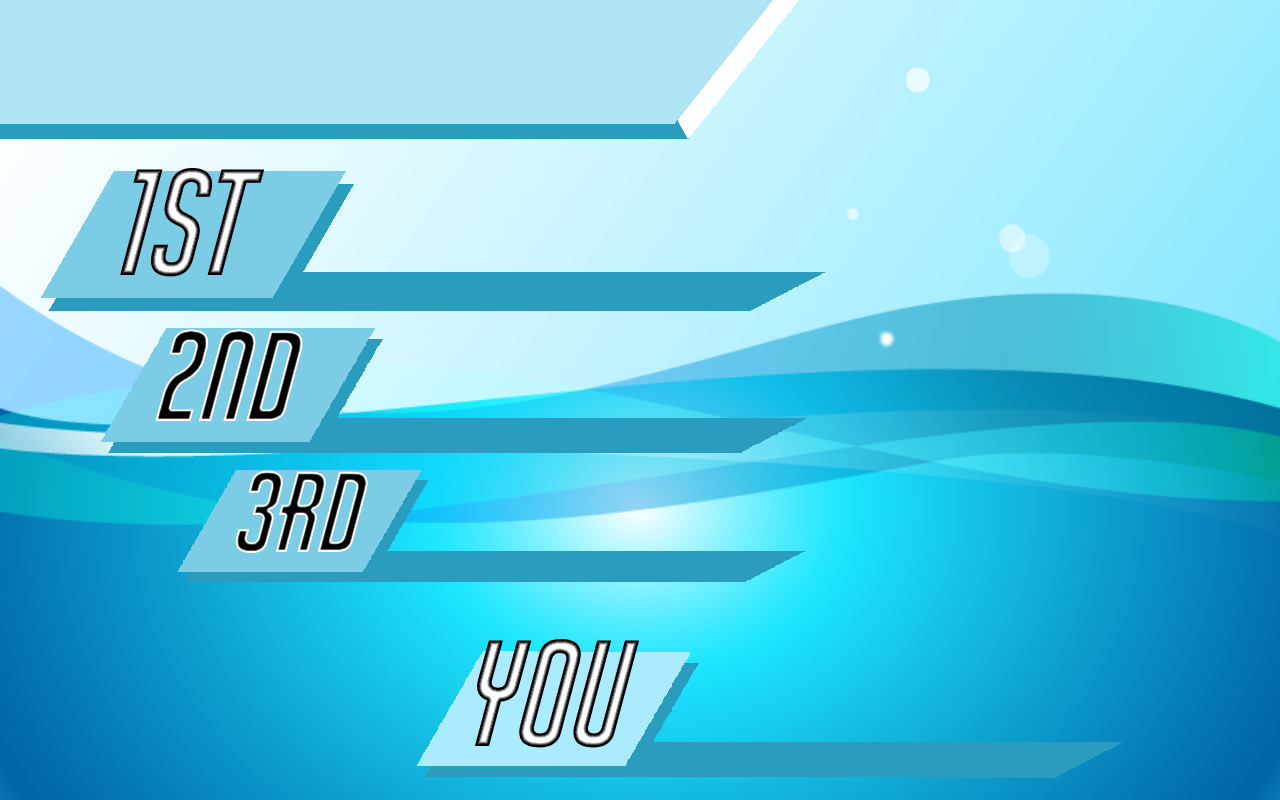
<style>
.page{position:relative;width:1280px;height:800px}
.page>*{position:absolute;margin:0}
.t1{font:141px "AirAmerica-Regular"}
.t2{font:120.6px "AirAmerica-Regular"}
.t3{font:107.2px "AirAmerica-Regular"}
</style>
<div class="page">
<p class="t1" style="left:120px;top:167px;width:145px;height:110px">1st</p>
<p class="t2" style="left:155px;top:329px;width:151px;height:93px">2nd</p>
<p class="t3" style="left:233px;top:470px;width:137px;height:84px">3rd</p>
<p class="t1" style="left:474px;top:638px;width:166px;height:110px">YOU</p>
</div>
